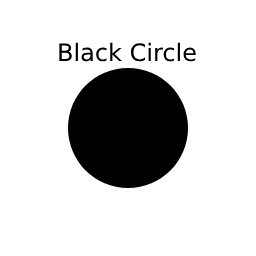
<style>
.page{position:relative;width:256px;height:256px;background:#ffffff}
.page>*{position:absolute;margin:0}
.t1{font:24px "DejaVuSans";color:#000000}
</style>
<div class="page">
<p class="t1" style="left:59px;top:42px;width:137px;height:20px">Black Circle</p>
</div>
